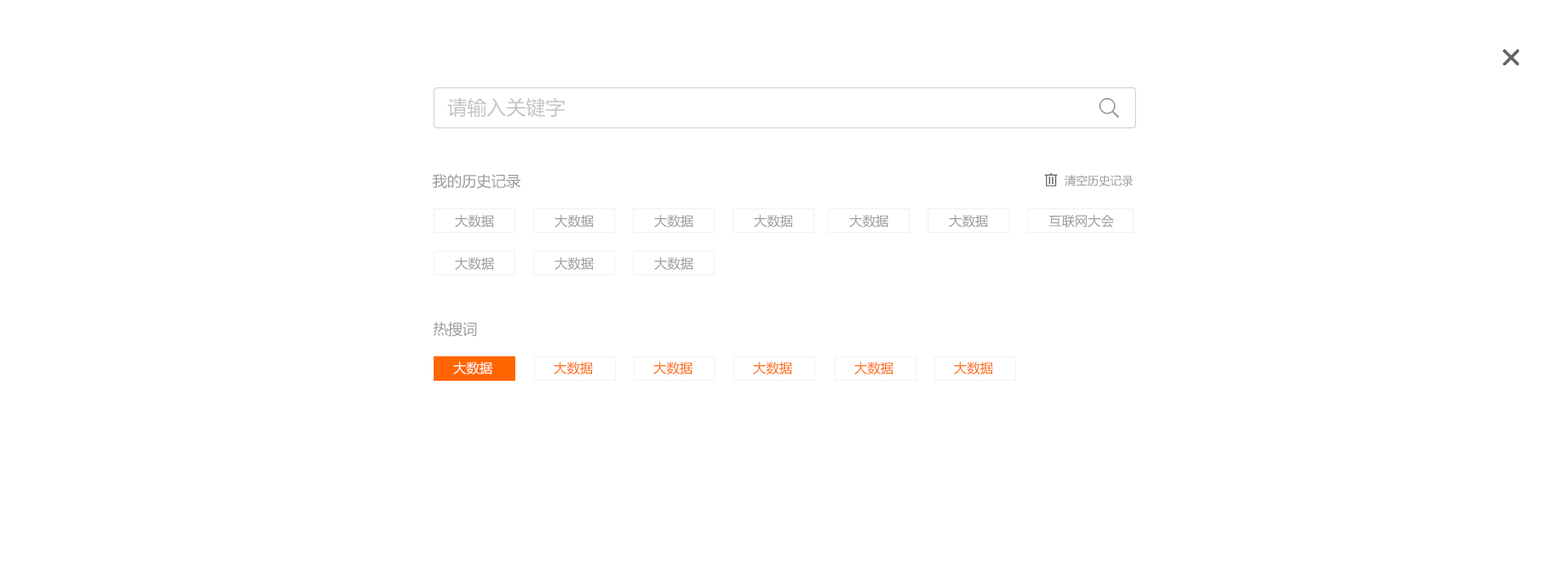
<style>
.page{position:relative;width:1568px;height:572px;background:#ffffff}
.page>*{position:absolute;margin:0}
.t1{font:19.6px "MicrosoftYaHei";color:#c3c3c3}
.t2{font:14.7px "MicrosoftYaHei";color:#999999}
.t3{font:11.4px "MicrosoftYaHei";color:#999999}
.t4{font:13.1px "MicrosoftYaHei";color:#999999}
.t5{font:13.1px "MicrosoftYaHei";color:#ffffff}
.t6{font:13.1px "MicrosoftYaHei";color:#ff6600}
</style>
<div class="page">
<p class="t1" style="left:448px;top:97px;width:117px;height:21px">请输入关键字</p>
<p class="t2" style="left:432px;top:174px;width:89px;height:15px">我的历史记录</p>
<p class="t3" style="left:1064px;top:175px;width:69px;height:11px">清空历史记录</p>
<p class="t4" style="left:455px;top:214px;width:39px;height:14px">大数据</p>
<p class="t4" style="left:555px;top:214px;width:39px;height:14px">大数据</p>
<p class="t4" style="left:654px;top:214px;width:39px;height:14px">大数据</p>
<p class="t4" style="left:754px;top:214px;width:39px;height:14px">大数据</p>
<p class="t4" style="left:849px;top:214px;width:40px;height:14px">大数据</p>
<p class="t4" style="left:949px;top:214px;width:39px;height:14px">大数据</p>
<p class="t4" style="left:1049px;top:214px;width:65px;height:14px">互联网大会</p>
<p class="t4" style="left:455px;top:256px;width:39px;height:14px">大数据</p>
<p class="t4" style="left:555px;top:256px;width:39px;height:14px">大数据</p>
<p class="t4" style="left:654px;top:256px;width:39px;height:14px">大数据</p>
<p class="t2" style="left:434px;top:321px;width:43px;height:15px">热搜词</p>
<p class="t5" style="left:453px;top:361px;width:39px;height:14px">大数据</p>
<p class="t6" style="left:554px;top:361px;width:39px;height:14px">大数据</p>
<p class="t6" style="left:653px;top:361px;width:40px;height:14px">大数据</p>
<p class="t6" style="left:753px;top:361px;width:39px;height:14px">大数据</p>
<p class="t6" style="left:854px;top:361px;width:39px;height:14px">大数据</p>
<p class="t6" style="left:954px;top:361px;width:39px;height:14px">大数据</p>
</div>
